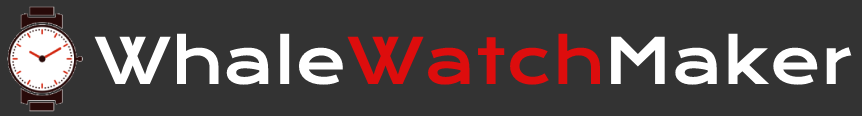
<style>
.page{position:relative;width:862px;height:116px;background:#333333}
.page>*{position:absolute;margin:0}
.t1{font:62px "KronaOne-Regular";color:#ffffff}
.t2{font:62px "KronaOne-Regular";color:#dd0d0d}
</style>
<div class="page">
<p class="t1" style="left:94px;top:33px;width:758px;height:52px">Whale<span class="t2">Watch</span>Maker</p>
</div>
